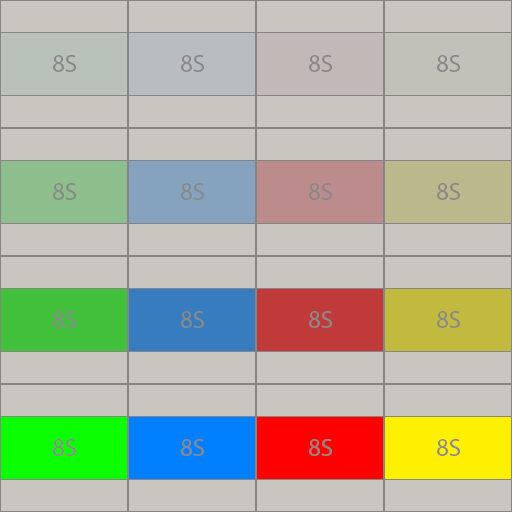
<style>
.page{position:relative;width:512px;height:512px;background:#c8c6bf}
.page>*{position:absolute;margin:0}
.t1{font:25px "MyriadPro-Regular";color:#898989}
</style>
<div class="page">
<p class="t1" style="left:53px;top:55px;width:23px;height:17px">8S</p>
<p class="t1" style="left:181px;top:55px;width:23px;height:17px">8S</p>
<p class="t1" style="left:309px;top:55px;width:23px;height:17px">8S</p>
<p class="t1" style="left:437px;top:55px;width:23px;height:17px">8S</p>
<p class="t1" style="left:53px;top:183px;width:23px;height:17px">8S</p>
<p class="t1" style="left:181px;top:183px;width:23px;height:17px">8S</p>
<p class="t1" style="left:309px;top:183px;width:23px;height:17px">8S</p>
<p class="t1" style="left:437px;top:183px;width:23px;height:17px">8S</p>
<p class="t1" style="left:53px;top:311px;width:23px;height:17px">8S</p>
<p class="t1" style="left:181px;top:311px;width:23px;height:17px">8S</p>
<p class="t1" style="left:309px;top:311px;width:23px;height:17px">8S</p>
<p class="t1" style="left:437px;top:311px;width:23px;height:17px">8S</p>
<p class="t1" style="left:53px;top:439px;width:23px;height:17px">8S</p>
<p class="t1" style="left:181px;top:439px;width:23px;height:17px">8S</p>
<p class="t1" style="left:309px;top:439px;width:23px;height:17px">8S</p>
<p class="t1" style="left:437px;top:439px;width:23px;height:17px">8S</p>
</div>
